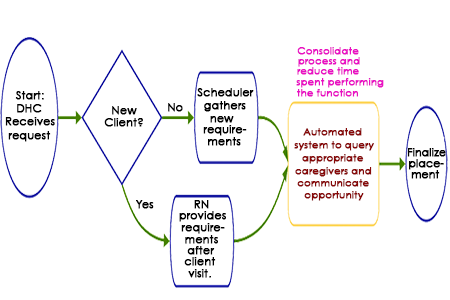
<style>
.page{position:relative;width:450px;height:300px;background:#ffffff}
.page>*{position:absolute;margin:0}
.t1{font:10px "CenturyGothic";color:#e910c3;font-weight:bold}
.t2{font:11px "CenturyGothic";color:#000000;font-weight:bold}
.t3{font:10px "CenturyGothic";color:#870909;font-weight:bold}
.t4{font:10.6px "CenturyGothic";color:#000000;font-weight:bold}
</style>
<div class="page">
<p class="t1" style="left:297px;top:47px;width:62px;height:8px">Consolidate</p>
<p class="t1" style="left:298px;top:57px;width:62px;height:10px">process and</p>
<p class="t1" style="left:296px;top:78px;width:88px;height:10px">spent performing</p>
<p class="t1" style="left:297px;top:67px;width:62px;height:8px">reduce time</p>
<p class="t2" style="left:197px;top:88px;width:57px;height:9px">Scheduler</p>
<p class="t1" style="left:297px;top:89px;width:61px;height:8px">the function</p>
<p class="t2" style="left:15px;top:91px;width:29px;height:9px">Start:</p>
<p class="t2" style="left:204px;top:101px;width:42px;height:11px">gathers</p>
<p class="t2" style="left:17px;top:104px;width:25px;height:9px">DHC</p>
<p class="t2" style="left:112px;top:106px;width:25px;height:9px">New</p>
<p class="t2" style="left:168px;top:103px;width:15px;height:9px">No</p>
<p class="t2" style="left:5px;top:117px;width:50px;height:9px">Receives</p>
<p class="t2" style="left:104px;top:118px;width:39px;height:9px">Client?</p>
<p class="t2" style="left:203px;top:125px;width:44px;height:11px">require-</p>
<p class="t2" style="left:210px;top:116px;width:24px;height:7px">new</p>
<p class="t2" style="left:8px;top:131px;width:43px;height:11px">request</p>
<p class="t2" style="left:208px;top:137px;width:33px;height:9px">ments</p>
<p class="t3" style="left:303px;top:128px;width:59px;height:8px">Automated</p>
<p class="t3" style="left:294px;top:141px;width:80px;height:10px">system to query</p>
<p class="t4" style="left:407px;top:148px;width:39px;height:9px">Finalize</p>
<p class="t3" style="left:302px;top:154px;width:62px;height:10px">appropriate</p>
<p class="t4" style="left:409px;top:159px;width:35px;height:11px">place-</p>
<p class="t3" style="left:295px;top:167px;width:77px;height:10px">caregivers and</p>
<p class="t4" style="left:411px;top:170px;width:29px;height:9px">ment</p>
<p class="t3" style="left:297px;top:179px;width:72px;height:8px">communicate</p>
<p class="t3" style="left:304px;top:191px;width:60px;height:10px">opportunity</p>
<p class="t2" style="left:136px;top:200px;width:18px;height:9px">Yes</p>
<p class="t2" style="left:194px;top:200px;width:15px;height:9px">RN</p>
<p class="t2" style="left:179px;top:211px;width:47px;height:11px">provides</p>
<p class="t2" style="left:181px;top:223px;width:44px;height:11px">require-</p>
<p class="t2" style="left:185px;top:235px;width:33px;height:9px">ments</p>
<p class="t2" style="left:187px;top:246px;width:28px;height:9px">after</p>
<p class="t2" style="left:184px;top:257px;width:32px;height:9px">client</p>
<p class="t2" style="left:188px;top:269px;width:23px;height:9px">visit.</p>
</div>
